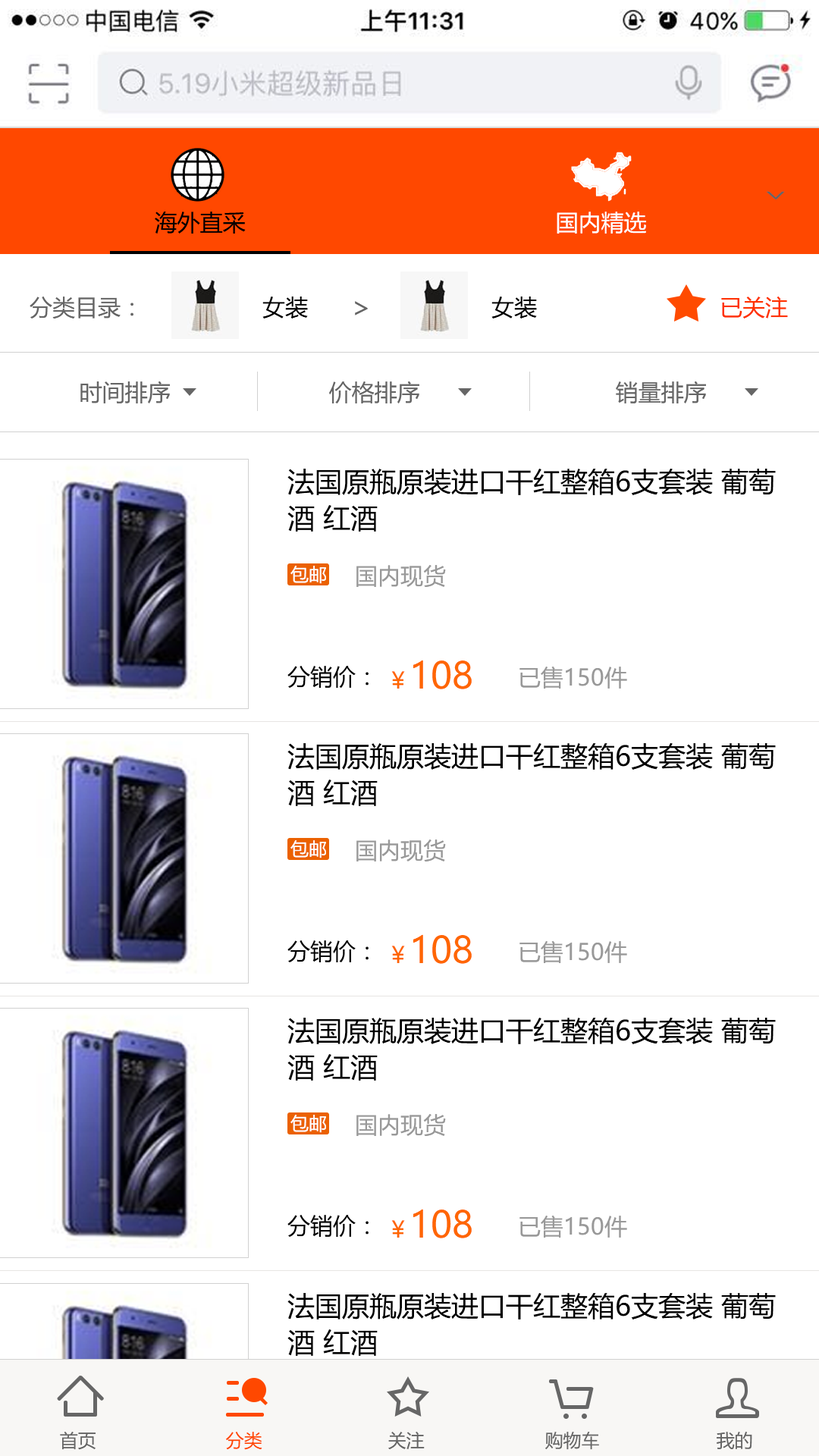
<style>
.page{position:relative;width:819px;height:1456px;background:#ffffff}
.page>*{position:absolute;margin:0}
.t1{font:35.6px "MicrosoftYaHei";color:#666666;scale:0.47 1}
.t2{font:22.7px "MicrosoftYaHei";color:#000000}
.t3{font:22.7px "MicrosoftYaHei";color:#ffffff}
.t4{font:22.7px "MicrosoftYaHei";color:#666666}
.t5{font:27.3px "MicrosoftYaHei";color:#666666}
.t6{font:22.7px "MicrosoftYaHei";color:#ff3300}
.t7{font:27.3px/36.4px "MicrosoftYaHei";color:#000000}
.t8{font:18.2px "MicrosoftYaHei";color:#ffffff}
.t9{font:22.7px "MicrosoftYaHei";color:#999999}
.t10{font:36.4px "MicrosoftYaHei";color:#ff6600}
.t11{font:22.7px "MicrosoftYaHei";color:#ff6600}
.t12{font:18.2px "MicrosoftYaHei";color:#666666}
.t13{font:18.2px "MicrosoftYaHei";color:#ff4800}
</style>
<div class="page">
<p class="t1" style="left:766px;top:191px;width:19px;height:8px;rotate:-90deg">&lt;</p>
<p class="t2" style="left:155px;top:212px;width:91px;height:22px">海外直采</p>
<p class="t3" style="left:557px;top:212px;width:89px;height:22px">国内精选</p>
<p class="t4" style="left:30px;top:297px;width:103px;height:22px">分类目录：</p>
<p class="t2" style="left:262px;top:297px;width:46px;height:21px">女装</p>
<p class="t5" style="left:355px;top:301px;width:13px;height:14px">&gt;</p>
<p class="t2" style="left:491px;top:297px;width:46px;height:21px">女装</p>
<p class="t6" style="left:721px;top:297px;width:67px;height:21px">已关注</p>
<p class="t4" style="left:80px;top:381px;width:90px;height:22px">时间排序</p>
<p class="t4" style="left:329px;top:381px;width:90px;height:22px">价格排序</p>
<p class="t4" style="left:616px;top:381px;width:90px;height:22px">销量排序</p>
<p class="t7" style="left:287px;top:469px;width:489px;height:63px">法国原瓶原装进口干红整箱6支套装 葡萄酒 红酒</p>
<p class="t8" style="left:290px;top:566px;width:36px;height:18px">包邮</p>
<p class="t9" style="left:356px;top:565px;width:90px;height:23px">国内现货</p>
<p class="t2" style="left:287px;top:666px;width:82px;height:22px">分销价：</p>
<p class="t10" style="left:391px;top:660px;width:81px;height:29px"><span class="t11">￥</span>108</p>
<p class="t9" style="left:519px;top:666px;width:108px;height:23px">已售150件</p>
<p class="t7" style="left:287px;top:743px;width:489px;height:63px">法国原瓶原装进口干红整箱6支套装 葡萄酒 红酒</p>
<p class="t8" style="left:290px;top:840px;width:36px;height:18px">包邮</p>
<p class="t9" style="left:356px;top:839px;width:90px;height:23px">国内现货</p>
<p class="t2" style="left:287px;top:940px;width:82px;height:22px">分销价：</p>
<p class="t10" style="left:391px;top:934px;width:81px;height:30px"><span class="t11">￥</span>108</p>
<p class="t9" style="left:519px;top:940px;width:108px;height:23px">已售150件</p>
<p class="t7" style="left:287px;top:1018px;width:489px;height:63px">法国原瓶原装进口干红整箱6支套装 葡萄酒 红酒</p>
<p class="t8" style="left:290px;top:1115px;width:36px;height:18px">包邮</p>
<p class="t9" style="left:356px;top:1114px;width:90px;height:23px">国内现货</p>
<p class="t2" style="left:287px;top:1215px;width:82px;height:22px">分销价：</p>
<p class="t10" style="left:391px;top:1209px;width:81px;height:29px"><span class="t11">￥</span>108</p>
<p class="t9" style="left:519px;top:1215px;width:108px;height:23px">已售150件</p>
<p class="t7" style="left:287px;top:1293px;width:489px;height:63px">法国原瓶原装进口干红整箱6支套装 葡萄酒 红酒</p>
<p class="t12" style="left:60px;top:1432px;width:36px;height:18px">首页</p>
<p class="t13" style="left:226px;top:1432px;width:36px;height:18px">分类</p>
<p class="t12" style="left:388px;top:1432px;width:37px;height:17px">关注</p>
<p class="t12" style="left:545px;top:1432px;width:54px;height:18px">购物车</p>
<p class="t12" style="left:717px;top:1432px;width:35px;height:17px">我的</p>
</div>
